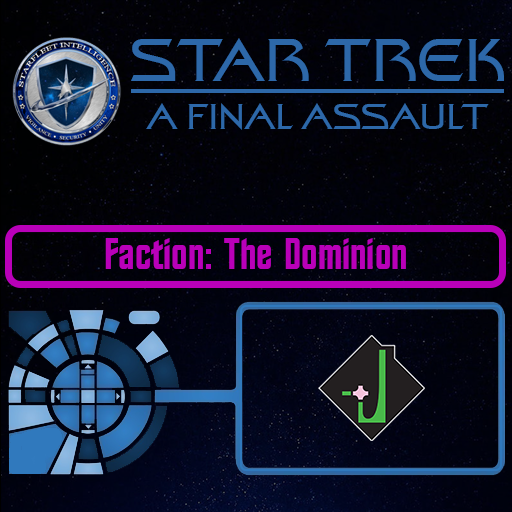
<style>
.page{position:relative;width:512px;height:512px}
.page>*{position:absolute;margin:0}
.t1{font:60px "StarTrekFilmBT-Regular";color:#2d68a9}
.t2{font:36px "StarTrekFilmBT-Regular";color:#2d68a9}
.t3{font:44px "StarTrekBT-Regular";color:#b900b9}
</style>
<div class="page">
<p class="t1" style="left:131px;top:38px;width:373px;height:43px">STAR TREK</p>
<p class="t2" style="left:146px;top:103px;width:343px;height:27px">A FINAL ASSAULT</p>
<p class="t3" style="left:105px;top:238px;width:301px;height:31px">Faction: The Dominion</p>
</div>
